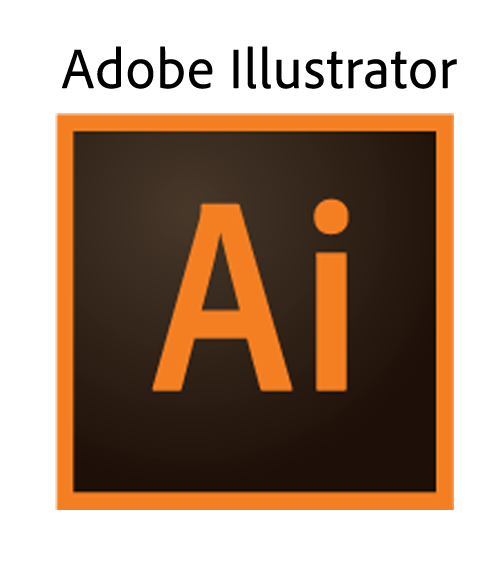
<style>
.page{position:relative;width:496px;height:580px;background:#ffffff}
.page>*{position:absolute;margin:0}
.t1{font:58px "AdobeCleanUX-Regular";color:#000000}
</style>
<div class="page">
<p class="t1" style="left:62px;top:46px;width:395px;height:43px">Adobe Illustrator</p>
</div>
